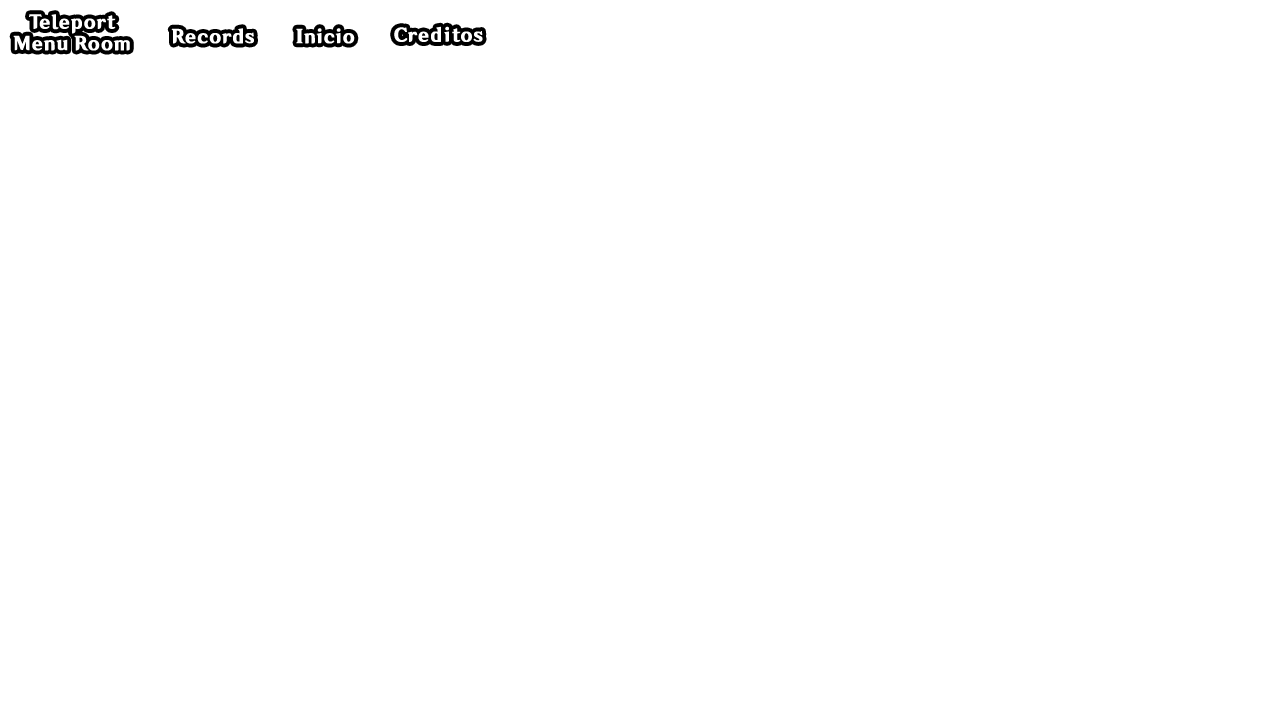
<style>
.page{position:relative;width:1280px;height:720px;background:#ffffff}
.page>*{position:absolute;margin:0}
.t1{font:18px "HYWenHei-HEW";color:#ffffff;font-weight:bold}
</style>
<div class="page">
<p class="t1" style="left:13px;top:14px;width:117px;height:37px;text-align:center">Teleport<br>Menu Room</p>
<p class="t1" style="left:171px;top:28px;width:83px;height:16px">Records</p>
<p class="t1" style="left:296px;top:28px;width:59px;height:16px">Inicio</p>
<p class="t1" style="left:394px;top:26px;width:89px;height:16px">Creditos</p>
</div>
